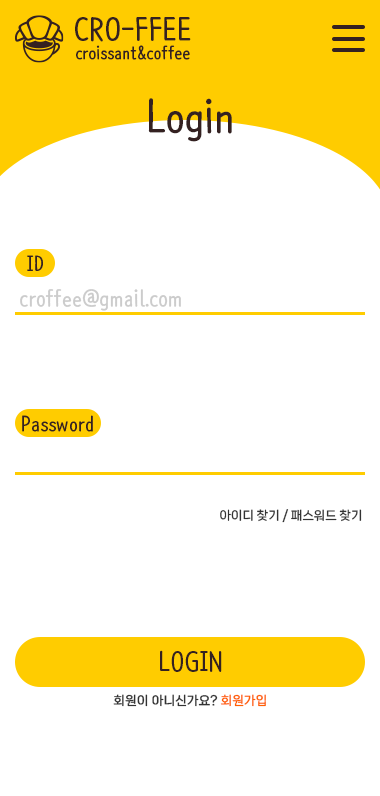
<style>
.page{position:relative;width:380px;height:796px;background:#ffffff}
.page>*{position:absolute;margin:0}
.t1{font:30px "NanumBarunpenOTF-Bold";color:#342121}
.t2{font:17px "NanumBarunpenOTF-Bold";color:#342121}
.t3{font:43px "NanumBarunpenOTF-Bold";color:#342121}
.t4{font:20px "NanumBarunpenOTF-Bold";color:#342121}
.t5{font:21.6px "NanumBarunpenOTF-Bold";color:#cccccc}
.t6{font:12px "NanumSquareNeoTTF-cBd";color:#333333}
.t7{font:26px "NanumBarunpenOTF-Bold";color:#342121}
.t8{font:12px "NanumSquareNeoTTF-bRg";color:#333333;font-weight:bold}
.t9{font:12px "NanumSquareNeoTTF-bRg";color:#ff6000;font-weight:bold}
</style>
<div class="page">
<p class="t1" style="left:75px;top:17px;width:116px;height:25px">CRO-FFEE</p>
<p class="t2" style="left:76px;top:45px;width:114px;height:15px">croissant&amp;coffee</p>
<p class="t3" style="left:148px;top:98px;width:84px;height:44px">Login</p>
<p class="t4" style="left:27px;top:255px;width:16px;height:16px">ID</p>
<p class="t5" style="left:20px;top:289px;width:161px;height:22px">croffee@gmail.com</p>
<p class="t4" style="left:22px;top:415px;width:71px;height:17px">Password</p>
<p class="t6" style="left:220px;top:509px;width:142px;height:14px">아이디 찾기 / 패스워드 찾기</p>
<p class="t7" style="left:160px;top:650px;width:62px;height:22px">LOGIN</p>
<p class="t8" style="left:113px;top:694px;width:105px;height:13px">회원이 아니신가요?</p>
<p class="t9" style="left:220px;top:694px;width:46px;height:13px">회원가입</p>
</div>
